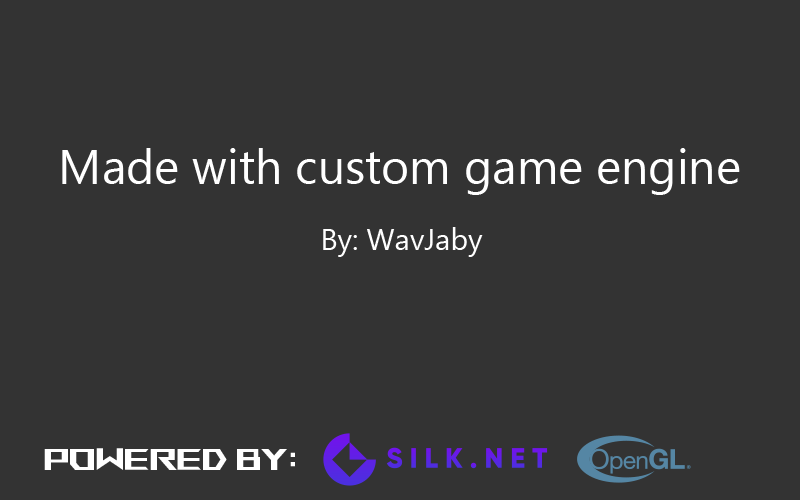
<style>
.page{position:relative;width:800px;height:500px;background:#333333}
.page>*{position:absolute;margin:0}
.t1{font:48px "SegoeUI";color:#ffffff}
.t2{font:30px "SegoeUI";color:#ffffff}
.t3{font:30px "ROGFonts-Regular";color:#ffffff}
</style>
<div class="page">
<p class="t1" style="left:62px;top:148px;width:678px;height:47px">Made with custom game engine</p>
<p class="t2" style="left:323px;top:227px;width:160px;height:30px">By: WavJaby</p>
<p class="t3" style="left:44px;top:448px;width:251px;height:22px">Powered By:</p>
</div>
